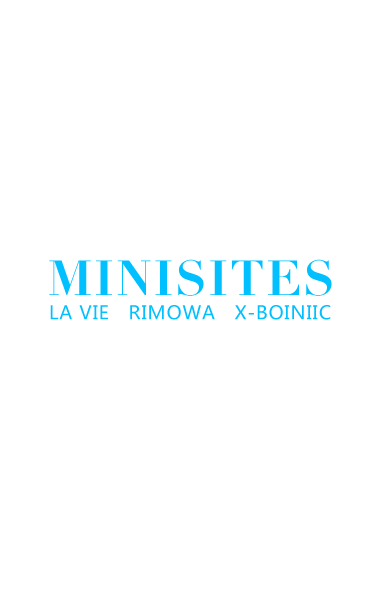
<style>
.page{position:relative;width:373px;height:600px;background:#ffffff}
.page>*{position:absolute;margin:0}
.t1{font:48.4px "Didot-Bold";letter-spacing:0.04em;color:#00c0ff;text-transform:uppercase}
.t2{font:18.6px "MicrosoftYaHei";letter-spacing:0.04em;color:#00c0ff;text-transform:uppercase}
</style>
<div class="page">
<p class="t1" style="left:49px;top:259px;width:283px;height:37px">MINISITES</p>
<p class="t2" style="left:50px;top:305px;width:281px;height:15px">la vie   RIMOWA   x-boiniic</p>
</div>
